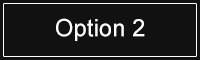
<style>
.page{position:relative;width:200px;height:60px;background:#111111}
.page>*{position:absolute;margin:0}
.t1{font:24px "ArialMT";color:#ffffff}
</style>
<div class="page">
<p class="t1" style="left:56px;top:18px;width:89px;height:23px">Option 2</p>
</div>
